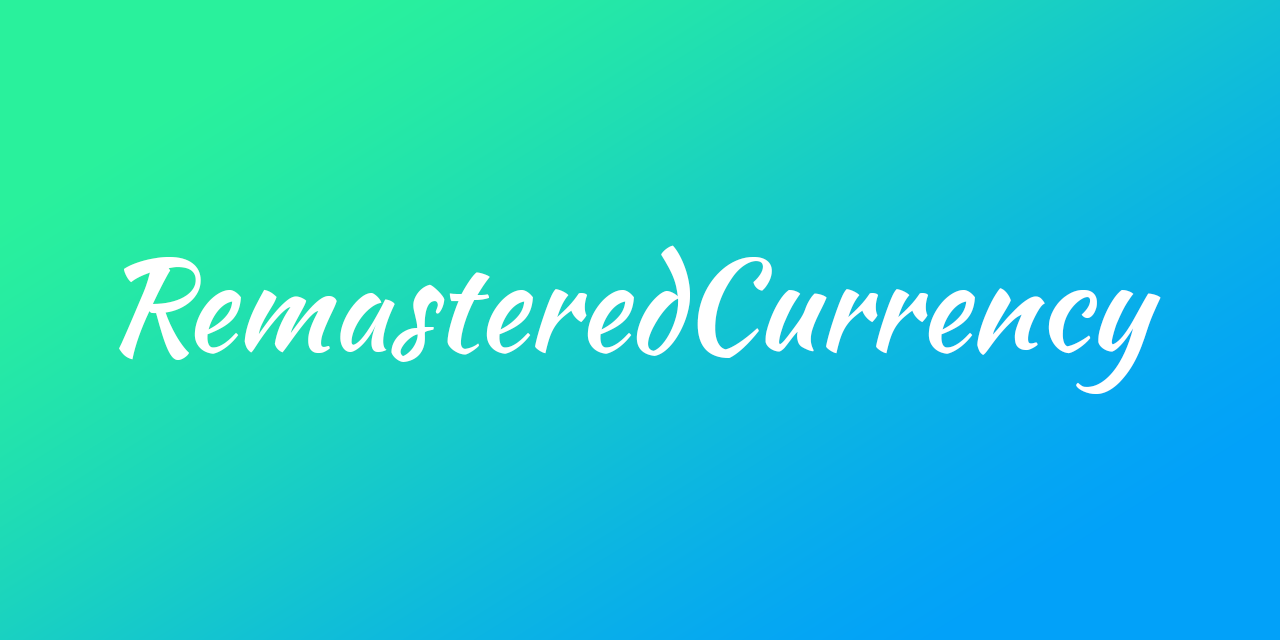
<style>
.page{position:relative;width:1280px;height:640px}
.page>*{position:absolute;margin:0}
.t1{font:125px "KaushanScript-Regular";color:#ffffff}
</style>
<div class="page">
<p class="t1" style="left:119px;top:245px;width:1042px;height:149px">RemasteredCurrency</p>
</div>
